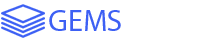
<style>
.page{position:relative;width:200px;height:40px;background:#ffffff}
.page>*{position:absolute;margin:0}
.t1{font:30px "MyriadPro-Regular";letter-spacing:0.005em;color:#3d60f4}
</style>
<div class="page">
<p class="t1" style="left:49px;top:10px;width:72px;height:21px">GEMS</p>
</div>
